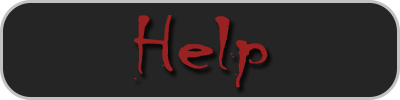
<style>
.page{position:relative;width:400px;height:100px;background:#252525}
.page>*{position:absolute;margin:0}
.t1{font:80px "Chiller-Regular";letter-spacing:-0.025em;color:#992122;scale:1.48 1}
</style>
<div class="page">
<p class="t1" style="left:134px;top:15px;width:134px;height:73px">Help</p>
</div>
